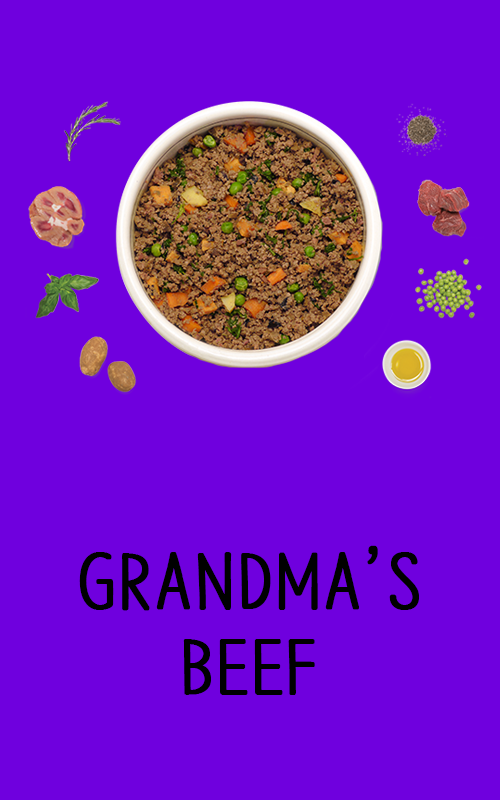
<style>
.page{position:relative;width:500px;height:800px;background:#6f00de}
.page>*{position:absolute;margin:0}
.t1{font:72px "NanumBarunpen";color:#000000;font-weight:bold}
</style>
<div class="page">
<p class="t1" style="left:79px;top:545px;width:340px;height:150px;text-align:center">GRANDMA’S<br>BEEF</p>
</div>
